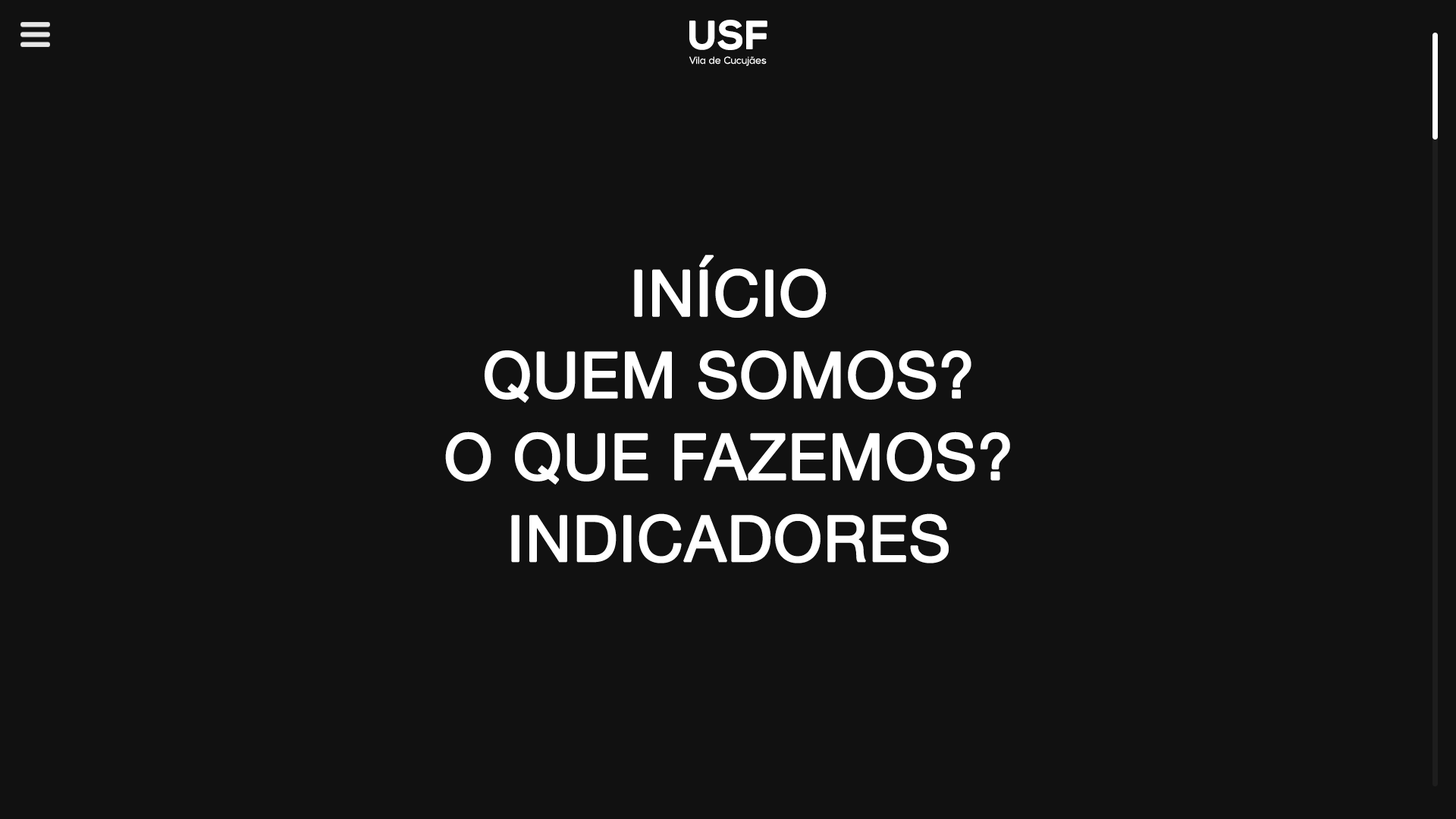
<style>
.page{position:relative;width:1456px;height:819px;background:#111111}
.page>*{position:absolute;margin:0}
.t1{font:39.1px "NexaBold";color:#ffffff;font-weight:bold}
.t2{font:9.6px "NexaLight";color:#ffffff;font-weight:bold}
.t3{font:63.3px "HelveticaNeue";color:#ffffff;font-weight:bold}
</style>
<div class="page">
<p class="t1" style="left:689px;top:20px;width:78px;height:30px">USF</p>
<p class="t2" style="left:689px;top:56px;width:78px;height:10px">Vila de Cucujães</p>
<p class="t3" style="left:634px;top:255px;width:193px;height:63px">INÍCIO</p>
<p class="t3" style="left:485px;top:350px;width:486px;height:53px">QUEM SOMOS?</p>
<p class="t3" style="left:445px;top:431px;width:565px;height:54px">O QUE FAZEMOS?</p>
<p class="t3" style="left:511px;top:513px;width:438px;height:50px">INDICADORES</p>
</div>
